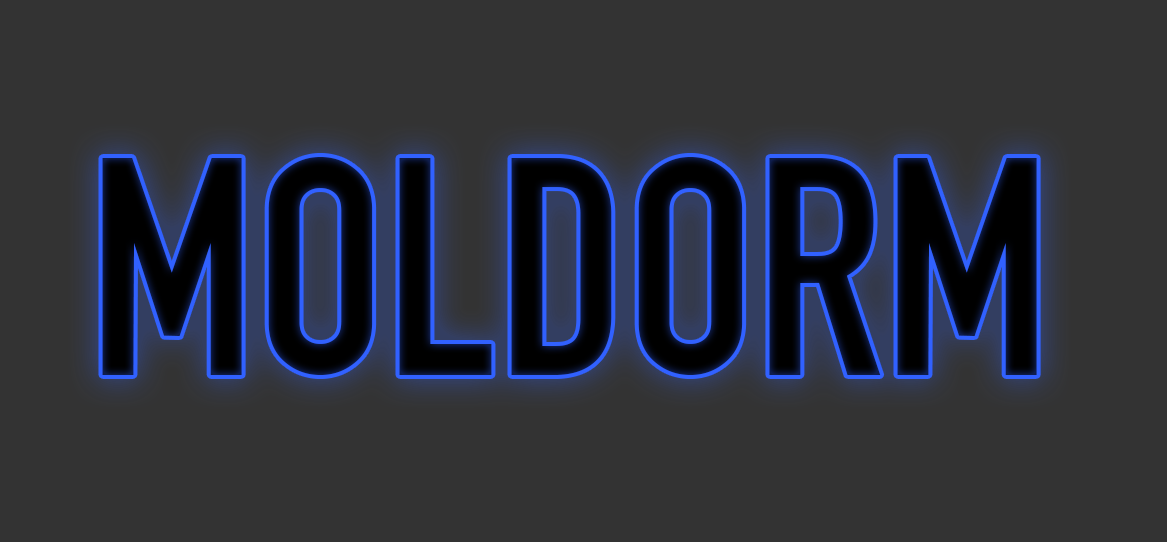
<style>
.page{position:relative;width:1167px;height:542px;background:#333333}
.page>*{position:absolute;margin:0}
.t1{font:302.5px "DINEngschrift";color:#010103}
</style>
<div class="page">
<p class="t1" style="left:102px;top:157px;width:935px;height:218px">MOLDORM</p>
</div>
